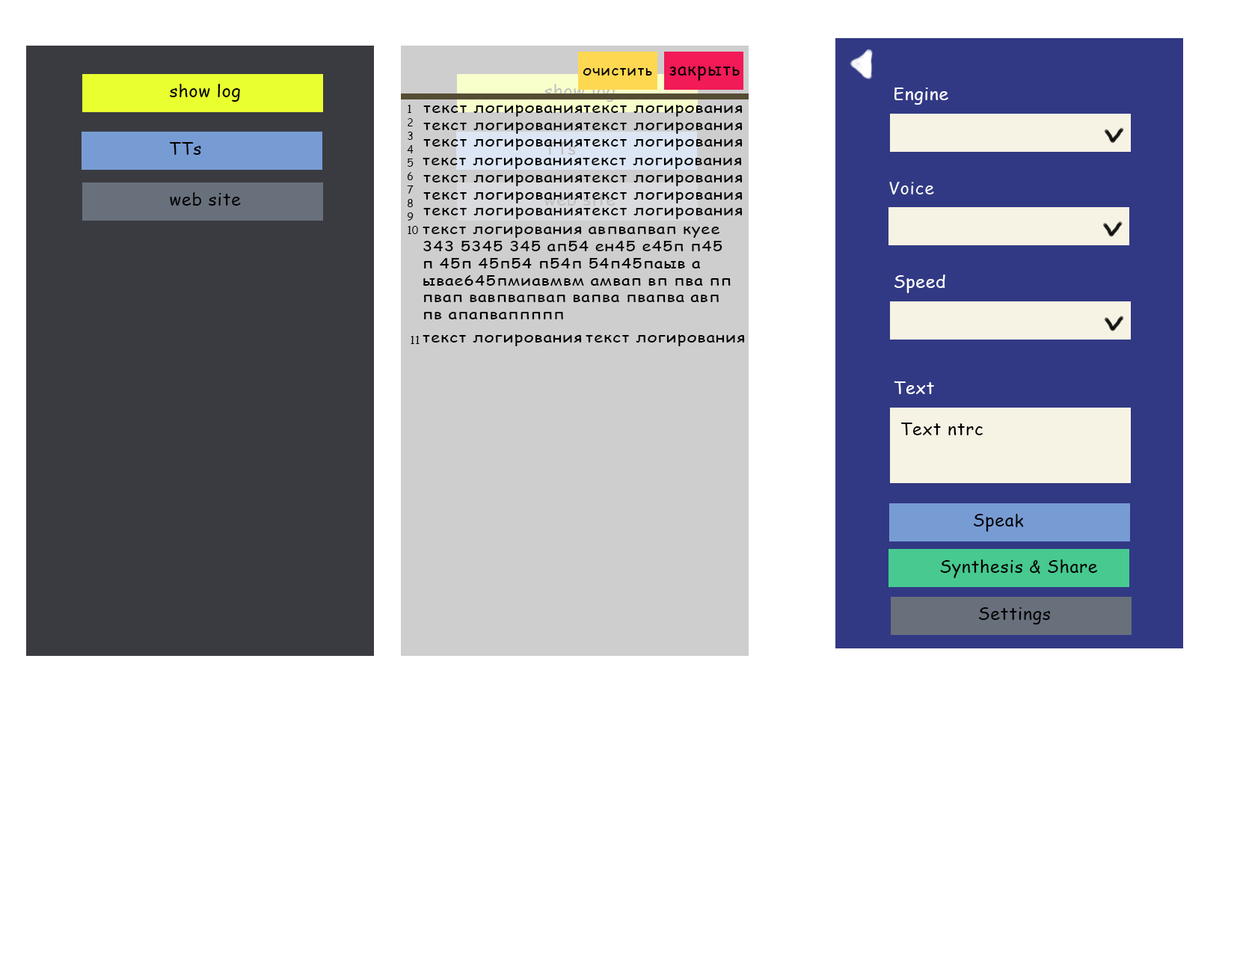
<style>
.page{position:relative;width:1237px;height:964px;background:#ffffff}
.page>*{position:absolute;margin:0}
.t1{font:17px "ComicSansMS";letter-spacing:0.04em;color:#000000;scale:1.06 1}
.t2{font:14.2px "ComicSansMS";letter-spacing:0.04em;color:#000000;scale:1.06 1}
.t3{font:17px "ComicSansMS";letter-spacing:0.04em;color:#000000}
.t4{font:17px "ComicSansMS";letter-spacing:0.04em;color:#ffffff}
.t5{font:11.2px "ComicSansMS";letter-spacing:0.04em;color:#000000;scale:0.91 1}
.t6{font:14.1px "ComicSansMS";letter-spacing:0.04em;color:#000000;scale:1.17 1}
</style>
<div class="page">
<p class="t1" style="left:669px;top:66px;width:71px;height:15px">закрыть</p>
<p class="t2" style="left:583px;top:68px;width:69px;height:8px">очистить</p>
<p class="t3" style="left:170px;top:84px;width:70px;height:18px">show log</p>
<p class="t4" style="left:894px;top:88px;width:54px;height:17px">Engine</p>
<p class="t5" style="left:407px;top:105px;width:11px;height:129px">1<br>2<br>3<br>4<br>5<br>6<br>7<br>8<br>9<br>10</p>
<p class="t6" style="left:423px;top:105px;width:160px;height:12px">текст логирования</p>
<p class="t6" style="left:583px;top:105px;width:160px;height:12px">текст логирования</p>
<p class="t6" style="left:423px;top:122px;width:160px;height:12px">текст логирования</p>
<p class="t6" style="left:583px;top:122px;width:160px;height:12px">текст логирования</p>
<p class="t3" style="left:169px;top:141px;width:32px;height:14px">TTs</p>
<p class="t6" style="left:423px;top:138px;width:160px;height:12px">текст логирования</p>
<p class="t6" style="left:583px;top:138px;width:160px;height:12px">текст логирования</p>
<p class="t6" style="left:423px;top:157px;width:159px;height:12px">текст логирования</p>
<p class="t6" style="left:583px;top:157px;width:159px;height:12px">текст логирования</p>
<p class="t6" style="left:423px;top:174px;width:160px;height:12px">текст логирования</p>
<p class="t6" style="left:583px;top:174px;width:160px;height:12px">текст логирования</p>
<p class="t3" style="left:170px;top:192px;width:71px;height:14px">web site</p>
<p class="t6" style="left:423px;top:191px;width:160px;height:12px">текст логирования</p>
<p class="t6" style="left:583px;top:191px;width:160px;height:12px">текст логирования</p>
<p class="t6" style="left:423px;top:207px;width:160px;height:12px">текст логирования</p>
<p class="t6" style="left:583px;top:207px;width:160px;height:12px">текст логирования</p>
<p class="t6" style="left:423px;top:226px;width:308px;height:93px">текст логирования авпвапвап куее 343 5345 345 ап54 ен45 е45п п45 п 45п 45п54 п54п 54п45паыв а ывае645пмиавмвм амвап вп пва пп<br>пвап вавпвапвап вапва пвапва авп<br>пв апапваппппп<br>вап вапвап</p>
<p class="t4" style="left:894px;top:274px;width:51px;height:19px">Speed</p>
<p class="t5" style="left:411px;top:336px;width:9px;height:8px">11</p>
<p class="t6" style="left:423px;top:334px;width:159px;height:12px">текст логирования</p>
<p class="t6" style="left:586px;top:334px;width:159px;height:12px">текст логирования</p>
<p class="t4" style="left:894px;top:381px;width:40px;height:13px">Text</p>
<p class="t3" style="left:900px;top:422px;width:83px;height:13px">Text ntrc</p>
<p class="t3" style="left:974px;top:514px;width:50px;height:18px">Speak</p>
<p class="t3" style="left:940px;top:559px;width:157px;height:19px">Synthesis &amp; Share</p>
<p class="t3" style="left:979px;top:607px;width:71px;height:17px">Settings</p>
</div>
